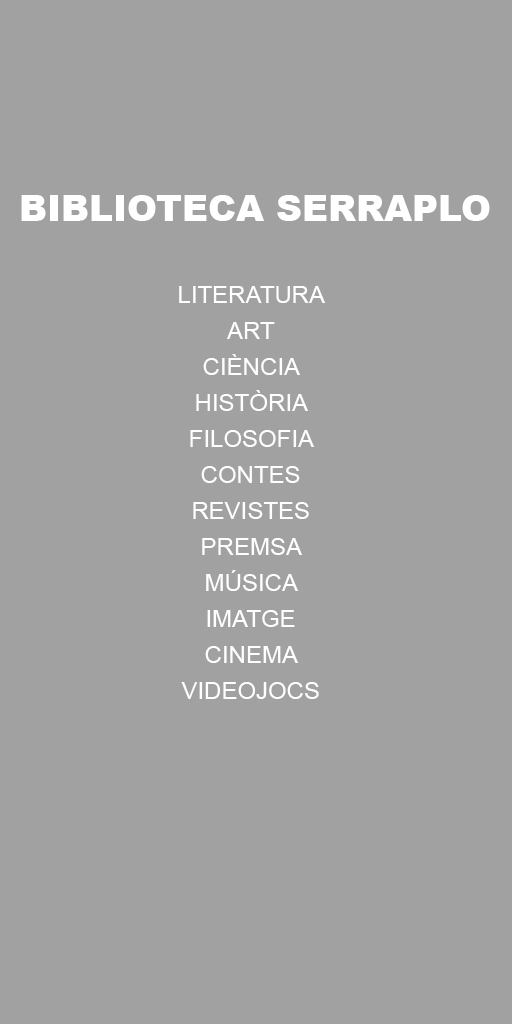
<style>
.page{position:relative;width:512px;height:1024px;background:#a1a1a1}
.page>*{position:absolute;margin:0}
.t1{font:36px "Arial-Black";color:#ffffff}
.t2{font:24px/36px "ArialMT";color:#ffffff}
</style>
<div class="page">
<p class="t1" style="left:21px;top:195px;width:469px;height:26px">BIBLIOTECA SERRAPLO</p>
<p class="t2" style="left:179px;top:286px;width:146px;height:413px;text-align:center">LITERATURA<br>ART<br>CIÈNCIA<br>HISTÒRIA<br>FILOSOFIA<br>CONTES<br>REVISTES<br>PREMSA<br>MÚSICA<br>IMATGE<br>CINEMA<br>VIDEOJOCS</p>
</div>
